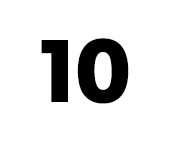
<style>
.page{position:relative;width:183px;height:152px;background:#ffffff}
.page>*{position:absolute;margin:0}
.t1{font:94.7px "TwCenMT-CondensedExtraBold";letter-spacing:-0.105em;color:#000000;scale:1.23 1}
</style>
<div class="page">
<p class="t1" style="left:41px;top:38px;width:88px;height:66px">10</p>
</div>
